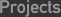
<style>
.page{position:relative;width:61px;height:17px;background:#333333}
.page>*{position:absolute;margin:0}
.t1{font:18px "DIN-1451-Mittelschrift-DB-Regular";color:#9a9a9a}
</style>
<div class="page">
<p class="t1" style="left:0px;top:0px;width:61px;height:17px">Projects</p>
</div>
